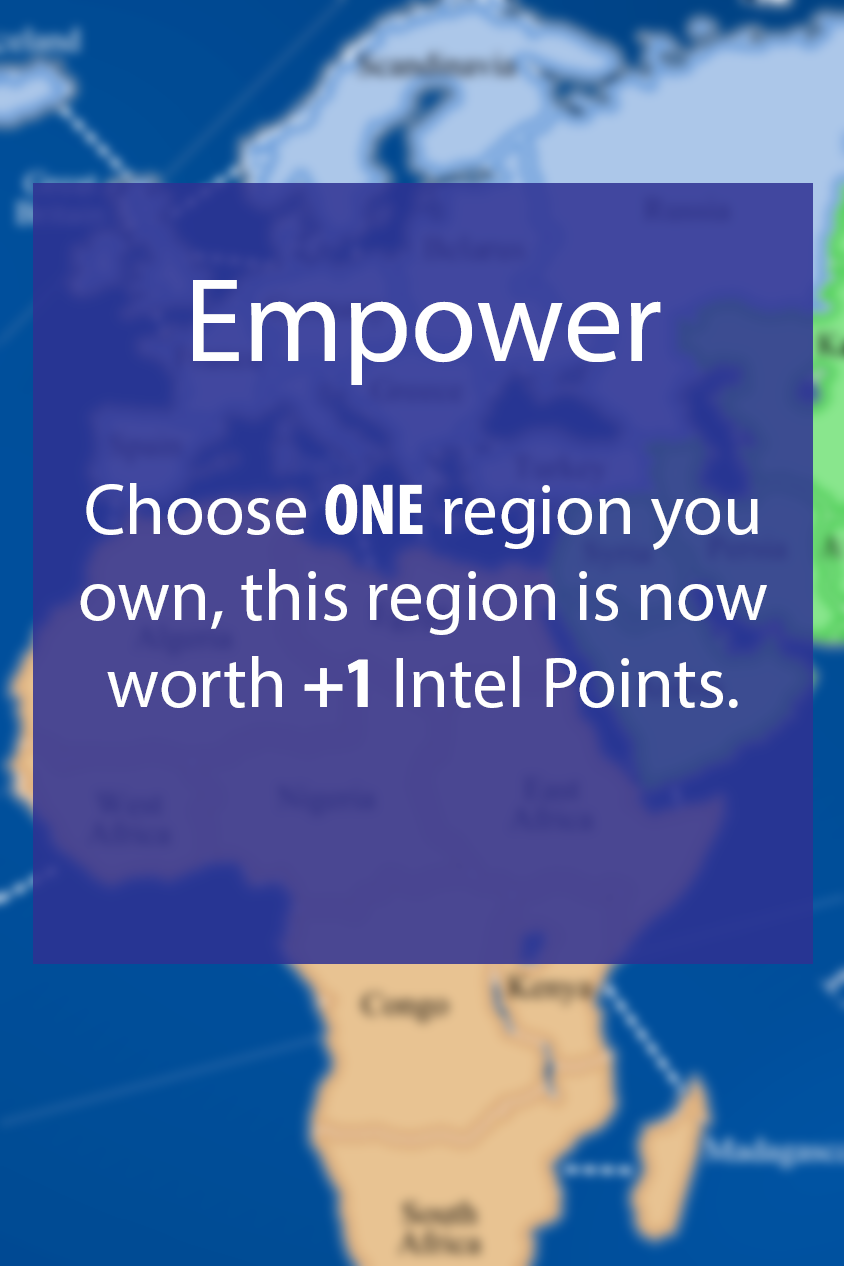
<style>
.page{position:relative;width:844px;height:1266px}
.page>*{position:absolute;margin:0}
.t1{font:72px "MyriadPro-Regular";color:#ffffff}
.t2{font:48px "MyriadPro-Regular";color:#ffffff}
.t3{font:120px "MyriadPro-Regular";color:#ffffff}
.t4{font:72px "MyriadPro-BoldCond";color:#ffffff}
</style>
<div class="page">
<p class="t1" style="left:80px;top:280px;width:687px;height:428px;text-align:center"><span class="t2"><br></span><span class="t3">Empower<br><br><br><br></span>Choose <span class="t4">ONE</span> region you own, this region is now worth <span class="t4">+1</span> Intel Points.</p>
</div>
